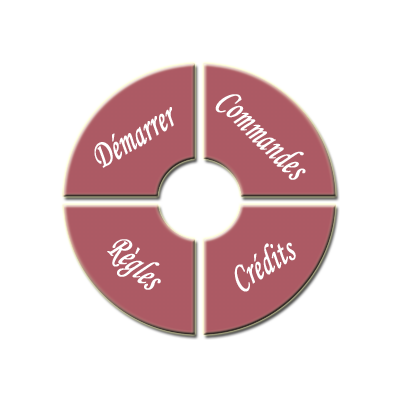
<style>
.page{position:relative;width:400px;height:400px;background:#ffffff}
.page>*{position:absolute;margin:0}
.t1{font:38.9px "MonotypeCorsiva";color:#ffffff;font-weight:bold;scale:0.65 1}
</style>
<div class="page">
<p class="t1" style="left:215px;top:94px;width:91px;height:86px;rotate:45deg">Commandes</p>
<p class="t1" style="left:94px;top:107px;width:80px;height:61px;rotate:-31deg">Démarrer</p>
<p class="t1" style="left:107px;top:239px;width:54px;height:51px;rotate:45deg">Règles</p>
<p class="t1" style="left:234px;top:242px;width:62px;height:50px;rotate:-31deg">Crédits</p>
</div>
